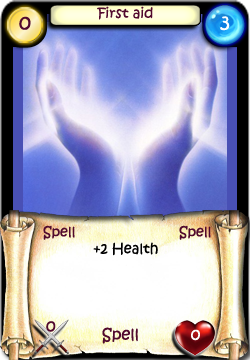
<style>
.page{position:relative;width:250px;height:360px}
.page>*{position:absolute;margin:0}
.t1{font:14px "KristenITC-Regular";color:#51092d}
.t2{font:20px "KristenITC-Regular";color:#51092d}
.t3{font:20px "KristenITC-Regular";color:#ffffff}
.t4{font:14px "KristenITC-Regular";color:#000000}
.t5{font:16px "KristenITC-Regular";color:#51092d}
.t6{font:16px "KristenITC-Regular";color:#fefefe}
</style>
<div class="page">
<p class="t1" style="left:97px;top:6px;width:56px;height:14px">First aid</p>
<p class="t2" style="left:19px;top:16px;width:12px;height:14px">0</p>
<p class="t3" style="left:220px;top:16px;width:10px;height:15px">3</p>
<p class="t1" style="left:43px;top:225px;width:32px;height:15px">Spell</p>
<p class="t1" style="left:179px;top:225px;width:32px;height:15px">Spell</p>
<p class="t4" style="left:93px;top:242px;width:65px;height:14px">+2 Health</p>
<p class="t5" style="left:46px;top:321px;width:10px;height:11px">0</p>
<p class="t5" style="left:102px;top:327px;width:36px;height:17px">Spell</p>
<p class="t6" style="left:191px;top:329px;width:9px;height:12px">0</p>
</div>
